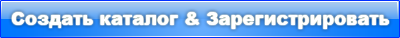
<style>
.page{position:relative;width:400px;height:38px}
.page>*{position:absolute;margin:0}
.t1{font:18px "Arial-Black";color:#ffffff}
</style>
<div class="page">
<p class="t1" style="left:11px;top:12px;width:378px;height:17px">Создать каталог &amp; Зарегистрировать</p>
</div>
